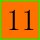
<style>
.page{position:relative;width:40px;height:40px;background:#ff7200}
.page>*{position:absolute;margin:0}
.t1{font:30px "SimSun";color:#000000}
</style>
<div class="page">
<p class="t1" style="left:9px;top:9px;width:25px;height:21px">11</p>
</div>
